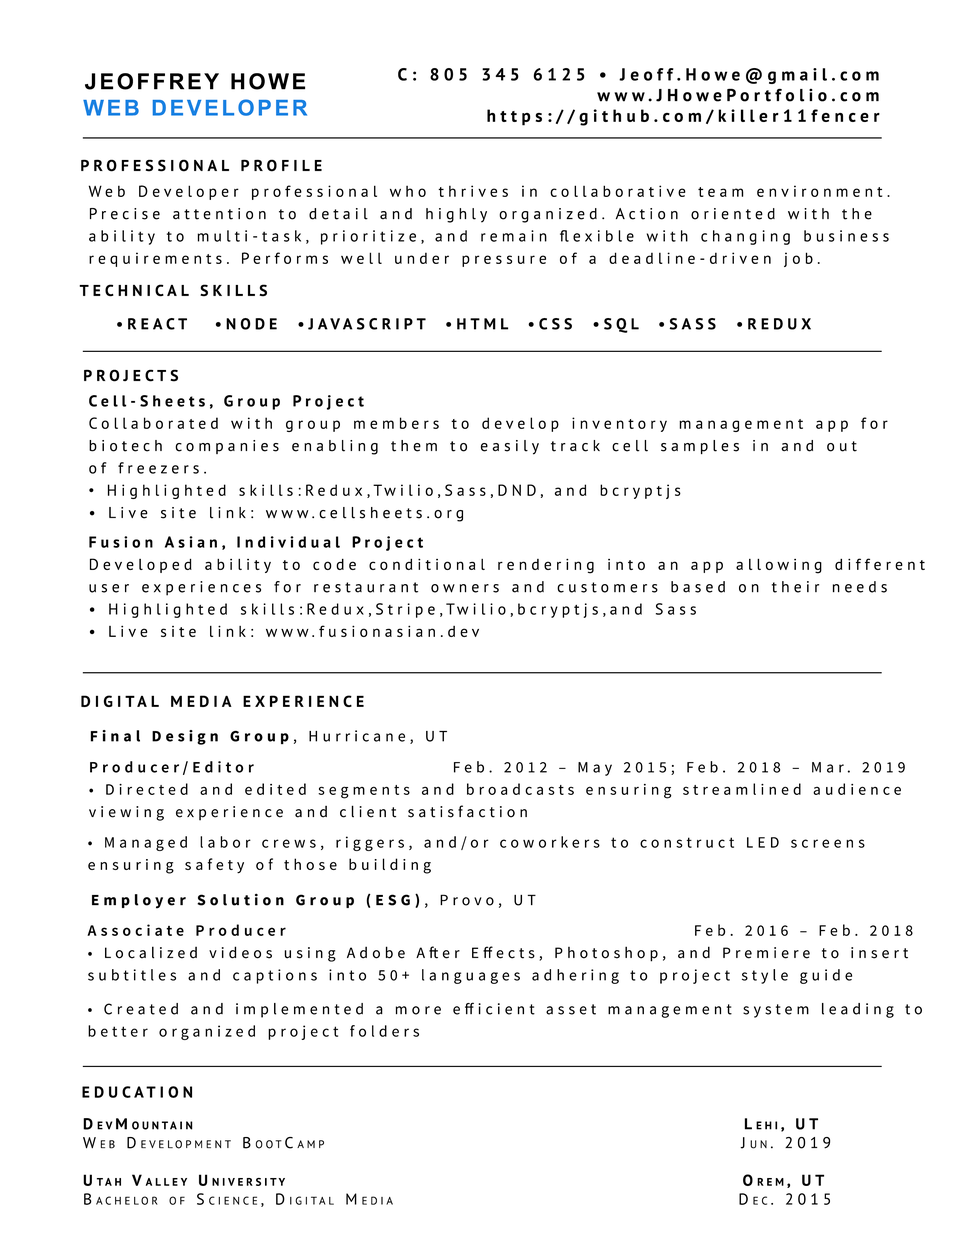
<style>
.page{position:relative;width:960px;height:1242px;background:#ffffff}
.page>*{position:absolute;margin:0}
.t1{font:22px "Arial-BoldMT";letter-spacing:0.12em;color:#000000}
.t2{font:22px "Arial-BoldMT";letter-spacing:0.12em;color:#1981e2}
.t3{font:17.3px "PTSans-Bold";letter-spacing:0.26em;color:#000000}
.t4{font:15.7px "PTSans-Bold";letter-spacing:0.26em;color:#000000}
.t5{font:15.7px/22.3px "PTSans-Regular";letter-spacing:0.26em;color:#000000}
.t6{font:15.7px/22.3px "PTSans-Bold";letter-spacing:0.26em;color:#000000}
.t7{font:15.7px/22.3px "ArialMT";letter-spacing:0.26em;color:#000000}
.t8{font:15.7px "SourceSansRoman-Bold";letter-spacing:0.26em;color:#000000}
.t9{font:15.7px "SourceSansRoman-Regular";letter-spacing:0.26em;color:#000000}
.t10{font:15.7px/22.3px "SourceSansRoman-Regular";letter-spacing:0.26em;color:#000000}
.t11{font:15.7px/22.3px "SourceSansRoman-Semibold";letter-spacing:0.26em;color:#000000}
.t12{font:15.7px "PTSans-Bold";letter-spacing:0.26em;color:#000000;font-variant:small-caps}
.t13{font:15.7px "PTSans-Regular";letter-spacing:0.26em;color:#000000;font-variant:small-caps}
</style>
<div class="page">
<p class="t1" style="left:83px;top:73px;width:225px;height:43px;text-align:center">JEOFFREY HOWE<br><span class="t2">WEB DEVELOPER</span></p>
<p class="t3" style="left:398px;top:68px;width:481px;height:58px;text-align:right">C: 805 345 6125 • Jeoff.Howe@gmail.com<br>www.JHowePortfolio.com<br>https://github.com/killer11fencer</p>
<p class="t4" style="left:81px;top:160px;width:240px;height:11px">PROFESSIONAL PROFILE</p>
<p class="t5" style="left:88px;top:186px;width:802px;height:81px">Web Developer professional who thrives in collaborative team environment. <br>Precise attention to detail and highly organized. Action oriented with the <br>ability to multi-task, prioritize, and remain flexible with changing business <br>requirements. Performs well under pressure of a deadline-driven job.</p>
<p class="t4" style="left:80px;top:285px;width:187px;height:11px">TECHNICAL SKILLS</p>
<p class="t4" style="left:117px;top:318px;width:694px;height:15px">•REACT   •NODE  •JAVASCRIPT  •HTML  •CSS  •SQL  •SASS  •REDUX</p>
<p class="t4" style="left:84px;top:370px;width:94px;height:11px">PROJECTS</p>
<p class="t5" style="left:89px;top:395px;width:799px;height:127px"><span class="t6">Cell-Sheets, Group Project<br></span>Collaborated with group members to develop inventory management app for <br>biotech companies enabling them to easily track cell samples in and out <br>of freezers.<br><span class="t7">• </span>Highlighted skills:Redux,Twilio,Sass,DND, and bcryptjs<br>• Live site link: www.cellsheets.org</p>
<p class="t5" style="left:89px;top:536px;width:836px;height:101px"><span class="t6">Fusion Asian, Individual Project<br></span>Developed ability to code conditional rendering into an app allowing different <br>user experiences for restaurant owners and customers based on their needs <br>• Highlighted skills:Redux,Stripe,Twilio,bcryptjs,and Sass<br>• Live site link: www.fusionasian.dev</p>
<p class="t4" style="left:81px;top:696px;width:283px;height:11px">DIGITAL MEDIA EXPERIENCE</p>
<p class="t8" style="left:91px;top:730px;width:356px;height:15px">Final Design Group<span class="t9">, Hurricane, UT</span></p>
<p class="t10" style="left:89px;top:761px;width:816px;height:60px"><span class="t11">Producer/Editor</span>                           Feb. 2012 – May 2015; Feb. 2018 – Mar. 2019<br>• Directed and edited segments and broadcasts ensuring streamlined audience <br>viewing experience and client satisfaction</p>
<p class="t10" style="left:88px;top:836px;width:776px;height:38px">• Managed labor crews, riggers, and/or coworkers to construct LED screens <br>ensuring safety of those building</p>
<p class="t8" style="left:92px;top:894px;width:444px;height:15px">Employer Solution Group (ESG)<span class="t9">, Provo, UT</span></p>
<p class="t10" style="left:87px;top:925px;width:825px;height:59px"><span class="t11">Associate Producer</span>                                                        Feb. 2016 – Feb. 2018<br>• Localized videos using Adobe After Effects, Photoshop, and Premiere to insert <br>subtitles and captions into 50+ languages adhering to project style guide</p>
<p class="t10" style="left:88px;top:1003px;width:834px;height:37px">• Created and implemented a more efficient asset management system leading to <br>better organized project folders</p>
<p class="t12" style="left:82px;top:1086px;width:110px;height:12px">EDUCATION</p>
<p class="t12" style="left:83px;top:1118px;width:747px;height:89px">DevMountain                                                                            Lehi, UT<br><span class="t13">Web Development BootCamp                                                          Jun. 2019<br><br></span>Utah Valley University                                                               Orem, UT<br><span class="t13">Bachelor of Science, Digital Media                                                Dec. 2015</span></p>
</div>
